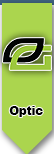
<style>
.page{position:relative;width:54px;height:154px;background:#abd54e}
.page>*{position:absolute;margin:0}
.t1{font:11.7px "Arial-Black";letter-spacing:-0.01em;color:#000000}
</style>
<div class="page">
<p class="t1" style="left:9px;top:106px;width:34px;height:11px">Optic</p>
</div>
